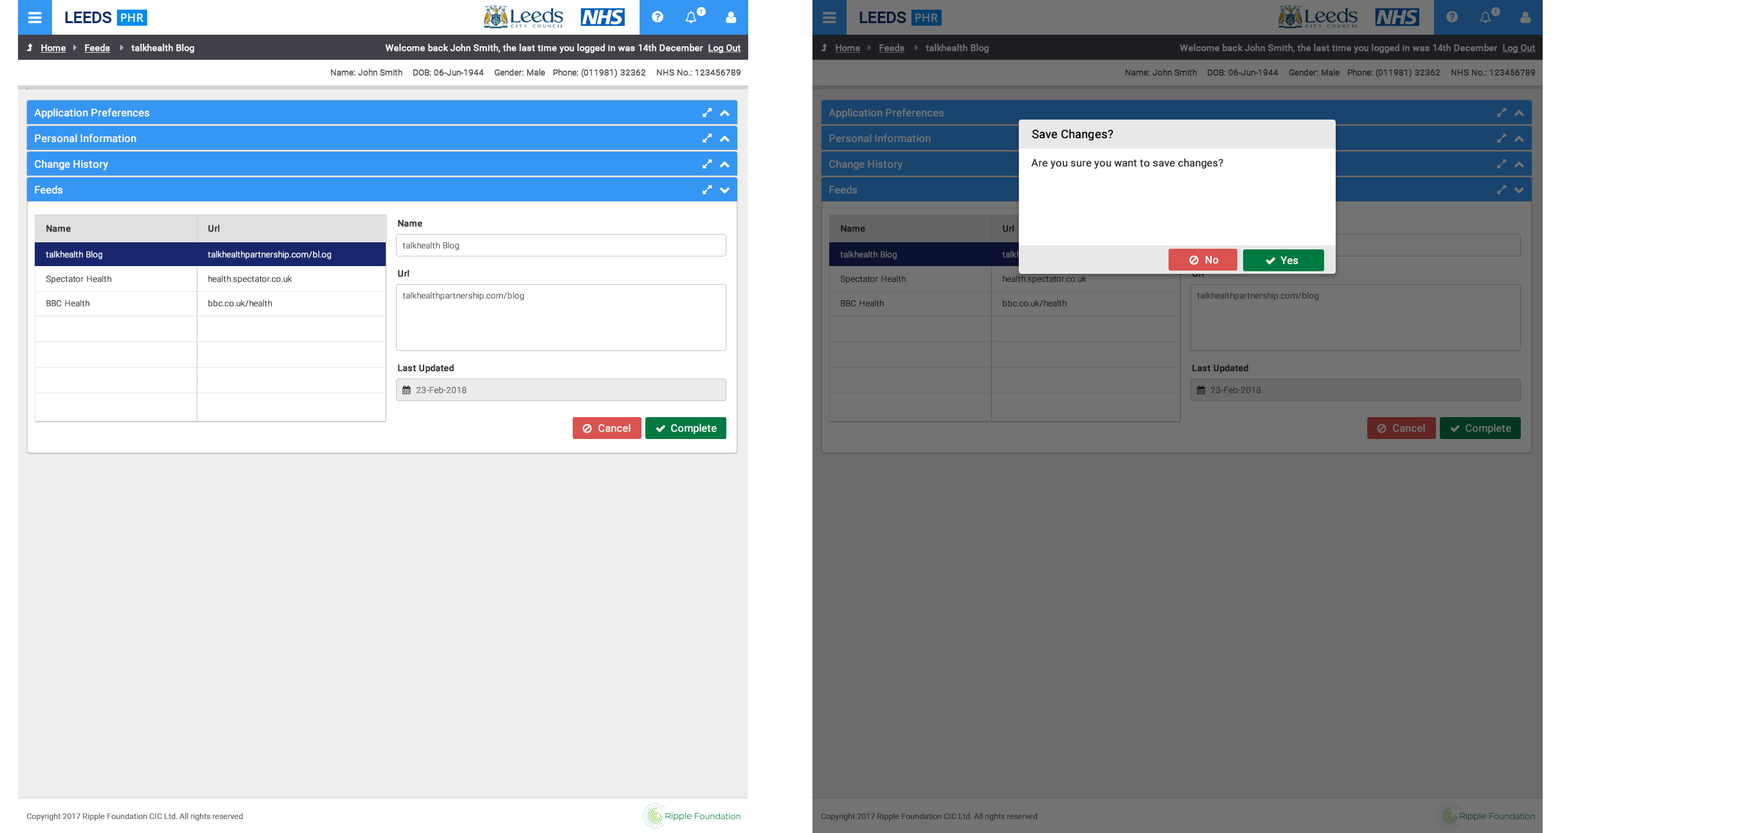
<style>
.page{position:relative;width:1758px;height:833px;background:#ffffff}
.page>*{position:absolute;margin:0}
.t1{font:10.3px "Roboto-Regular";color:#ffffff;font-weight:bold}
.t2{font:10.3px "Roboto-Regular";color:#737373;font-weight:bold}
.t3{font:11.6px "Roboto-Regular";color:#000000;font-weight:bold}
.t4{font:10.3px "Roboto-Regular";color:#313131;font-weight:bold}
.t5{font:9px "Roboto-Medium";color:#333333;font-weight:bold}
.t6{font:9px "Roboto-Medium";color:#171717;font-weight:bold}
.t7{font:8.4px "Roboto-Light";color:#5c5c5c;font-weight:bold}
.t8{font:8.4px "Roboto-Light";color:#ffffff;font-weight:bold}
.t9{font:8.4px "Roboto-Light";font-weight:bold}
.t10{font:8.4px "Roboto-Light";color:#313131;font-weight:bold}
.t11{font:8.4px "Roboto-Light";color:#161616;font-weight:bold}
.t12{font:8.4px "Roboto-Light";color:#292929;font-weight:bold}
</style>
<div class="page">
<p class="t1" style="left:34px;top:108px;width:116px;height:11px">Application Preferences</p>
<p class="t2" style="left:829px;top:108px;width:115px;height:11px">Application Preferences</p>
<p class="t1" style="left:35px;top:134px;width:101px;height:9px">Personal Information</p>
<p class="t2" style="left:829px;top:134px;width:102px;height:9px">Personal Information</p>
<p class="t3" style="left:1032px;top:129px;width:81px;height:12px">Save Changes?</p>
<p class="t1" style="left:35px;top:159px;width:73px;height:11px">Change History</p>
<p class="t2" style="left:829px;top:159px;width:74px;height:11px">Change History</p>
<p class="t4" style="left:1031px;top:158px;width:192px;height:11px">Are you sure you want to save changes?</p>
<p class="t1" style="left:35px;top:185px;width:28px;height:9px">Feeds</p>
<p class="t2" style="left:829px;top:185px;width:29px;height:9px">Feeds</p>
<p class="t5" style="left:398px;top:220px;width:24px;height:7px">Name</p>
<p class="t5" style="left:46px;top:224px;width:174px;height:8px">Name          Url</p>
<p class="t6" style="left:841px;top:224px;width:173px;height:8px">Name          Url</p>
<p class="t7" style="left:402px;top:242px;width:57px;height:9px">talkhealth Blog</p>
<p class="t8" style="left:46px;top:251px;width:285px;height:9px">talkhealth Blog        talkhealthpartnership.com/bl.og</p>
<p class="t9" style="left:840px;top:251px;width:286px;height:9px">talkhealth Blog        talkhealthpartnership.com/bl.og</p>
<p class="t1" style="left:1205px;top:256px;width:14px;height:8px">No</p>
<p class="t1" style="left:1281px;top:256px;width:18px;height:8px">Yes</p>
<p class="t5" style="left:398px;top:269px;width:12px;height:8px">Url</p>
<p class="t10" style="left:46px;top:275px;width:246px;height:9px">Spectator Health       health.spectator.co.uk</p>
<p class="t11" style="left:840px;top:275px;width:246px;height:9px">Spectator Health       health.spectator.co.uk</p>
<p class="t7" style="left:402px;top:292px;width:122px;height:9px">talkhealthpartnership.com/blog</p>
<p class="t12" style="left:1197px;top:292px;width:121px;height:9px">talkhealthpartnership.com/blog</p>
<p class="t10" style="left:46px;top:300px;width:226px;height:7px">BBC Health        bbc.co.uk/health</p>
<p class="t11" style="left:841px;top:300px;width:225px;height:7px">BBC Health        bbc.co.uk/health</p>
<p class="t5" style="left:398px;top:364px;width:56px;height:10px">Last Updated</p>
<p class="t6" style="left:1192px;top:364px;width:56px;height:10px">Last Updated</p>
</div>
